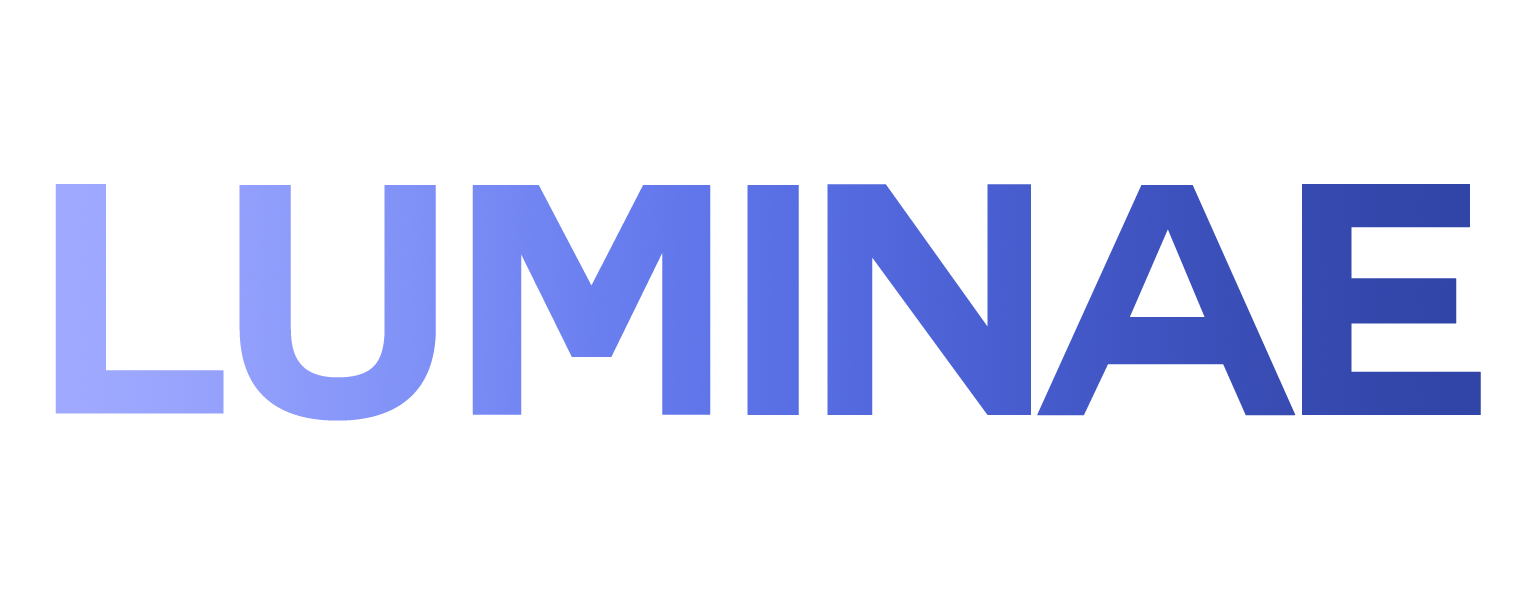
<style>
.page{position:relative;width:1537px;height:611px;background:#ffffff}
.page>*{position:absolute;margin:0}
.t1{font:321px "Couture-Bold";letter-spacing:-0.06em;font-weight:bold}
</style>
<div class="page">
<p class="t1" style="left:55px;top:184px;width:1426px;height:237px">LuMInae</p>
</div>
